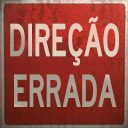
<style>
.page{position:relative;width:128px;height:128px}
.page>*{position:absolute;margin:0}
.t1{font:48px/50.7px "HighwayGothic";letter-spacing:-0.01em;scale:0.65 1}
</style>
<div class="page">
<p class="t1" style="left:10px;top:16px;width:109px;height:91px">DIREÇÃO<br>ERRADA</p>
</div>
